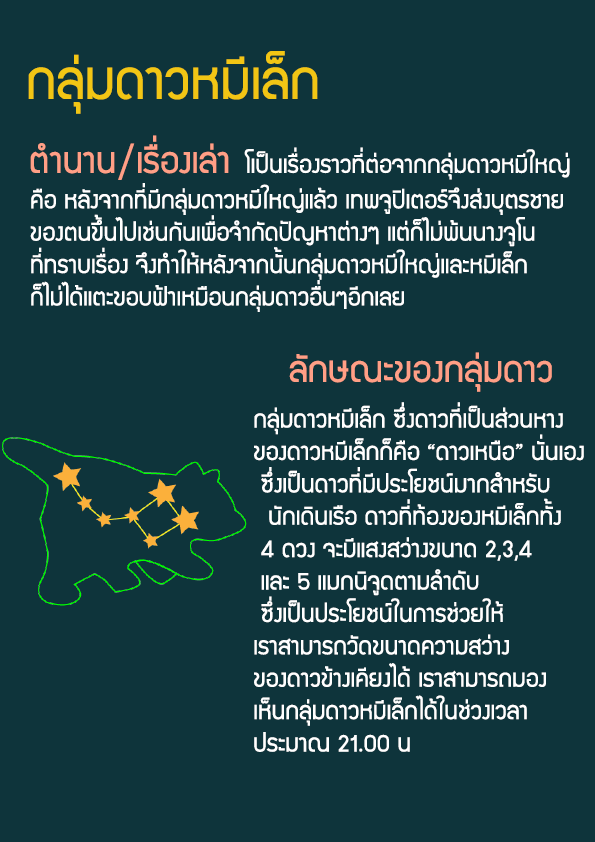
<style>
.page{position:relative;width:595px;height:842px;background:#0e343b}
.page>*{position:absolute;margin:0}
.t1{font:60px "supermarket";color:#f2c614}
.t2{font:40px "supermarket";color:#ff9f86}
.t3{font:27px "supermarket";color:#ffffff}
</style>
<div class="page">
<p class="t1" style="left:28px;top:51px;width:290px;height:63px">กลุ่มดาวหมีเล็ก</p>
<p class="t2" style="left:30px;top:135px;width:199px;height:45px">ตำนาน/เรื่องเล่า</p>
<p class="t3" style="left:244px;top:147px;width:326px;height:33px">โเป็นเรื่องราวที่ต่อจากกลุ่มดาวหมีใหญ่</p>
<p class="t3" style="left:30px;top:183px;width:533px;height:129px">คือ หลังจากที่มีกลุ่มดาวหมีใหญ่แล้ว เทพจูปิเตอร์จึงส่งบุตรชาย<br>ของตนขึ้นไปเช่นกันเพื่อจำกัดปัญหาต่างๆ แต่ก็ไม่พ้นนางจูโน<br>ที่ทราบเรื่อง จึงทำให้หลังจากนั้นกลุ่มดาวหมีใหญ่และหมีเล็ก<br>ก็ไม่ได้แตะขอบฟ้าเหมือนกลุ่มดาวอื่นๆอีกเลย</p>
<p class="t2" style="left:289px;top:352px;width:263px;height:40px">ลักษณะของกลุ่มดาว</p>
<p class="t3" style="left:254px;top:402px;width:330px;height:350px">กลุ่มดาวหมีเล็ก ซึ่งดาวที่เป็นส่วนหาง<br>ของดาวหมีเล็กก็คือ “ดาวเหนือ” นั่นเอง<br> ซึ่งเป็นดาวที่มีประโยชน์มากสำหรับ<br>  นักเดินเรือ ดาวที่ท้องของหมีเล็กทั้ง <br> 4 ดวง จะมีแสงสว่างขนาด 2,3,4 <br> และ 5 แมกนิจูดตามลำดับ <br> ซึ่งเป็นประโยชน์ในการช่วยให้<br>เราสามารถวัดขนาดความสว่าง <br>ของดาวข้างเคียงได้ เราสามารถมอง<br>เห็นกลุ่มดาวหมีเล็กได้ในช่วงเวลา<br>ประมาณ 21.00 น</p>
</div>
